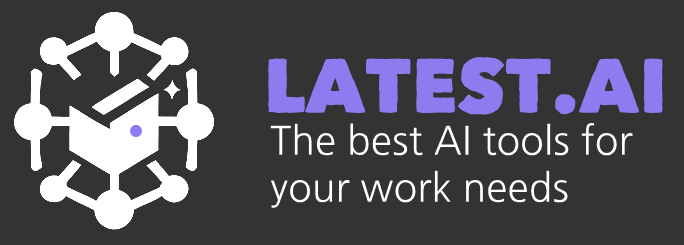
<style>
.page{position:relative;width:684px;height:245px;background:#333333}
.page>*{position:absolute;margin:0}
.t1{font:77px "Matiz";color:#8c7cf0}
.t2{font:39px "NanumGothic";color:#ffffff}
</style>
<div class="page">
<p class="t1" style="left:268px;top:56px;width:395px;height:59px">LATEST.AI</p>
<p class="t2" style="left:270px;top:123px;width:363px;height:85px">The best AI tools for your work needs</p>
</div>
